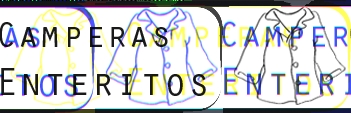
<style>
.page{position:relative;width:351px;height:113px;background:#ffffff}
.page>*{position:absolute;margin:0}
.t1{font:40px "OratorStd"}
.t2{font:37px "OratorStd"}
</style>
<div class="page">
<p class="t1" style="left:127px;top:21px;width:207px;height:74px"><span class="t2">Camperas<br></span>Enteritos</p>
</div>
